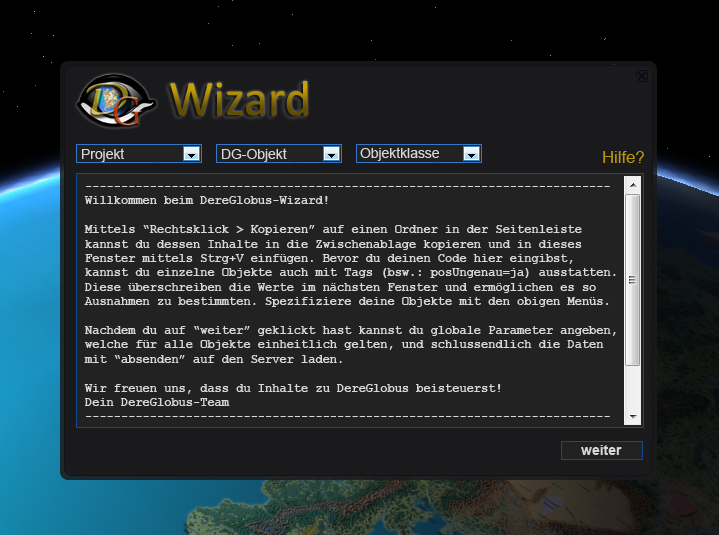
<style>
.page{position:relative;width:719px;height:535px;background:#222222}
.page>*{position:absolute;margin:0}
.t1{font:13.9px "ArialMT";color:#d7d7d7}
.t2{font:16.7px "ArialMT";color:#b99708}
.t3{font:12px "CourierNewPS-BoldMT";color:#d7d7d7}
.t4{font:14px "Arial-BoldMT";color:#d7d7d7}
</style>
<div class="page">
<p class="t1" style="left:82px;top:148px;width:43px;height:14px">Projekt</p>
<p class="t1" style="left:222px;top:148px;width:65px;height:14px">DG-Objekt</p>
<p class="t1" style="left:360px;top:147px;width:79px;height:14px">Objektklasse</p>
<p class="t2" style="left:603px;top:151px;width:41px;height:12px">Hilfe?</p>
<p class="t3" style="left:84px;top:186px;width:532px;height:231px">-------------------------------------------------------------------------<br>Willkommen beim DereGlobus-Wizard!<br><br>Mittels “Rechtsklick &gt; Kopieren” auf einen Ordner in der Seitenleiste<br>kannst du dessen Inhalte in die Zwischenablage kopieren und in dieses<br>Fenster mittels Strg+V einfügen. Bevor du deinen Code hier eingibst,<br>kannst du einzelne Objekte auch mit Tags (bsw.: posUngenau=ja) ausstatten.<br>Diese überschreiben die Werte im nächsten Fenster und ermöglichen es so<br>Ausnahmen zu bestimmten. Spezifiziere deine Objekte mit den obigen Menüs. <br><br>Nachdem du auf “weiter” geklickt hast kannst du globale Parameter angeben,<br>welche für alle Objekte einheitlich gelten, und schlussendlich die Daten<br>mit “absenden” auf den Server laden.<br><br>Wir freuen uns, dass du Inhalte zu DereGlobus beisteuerst!<br>Dein DereGlobus-Team<br>-------------------------------------------------------------------------</p>
<p class="t4" style="left:581px;top:445px;width:41px;height:10px">weiter</p>
</div>
